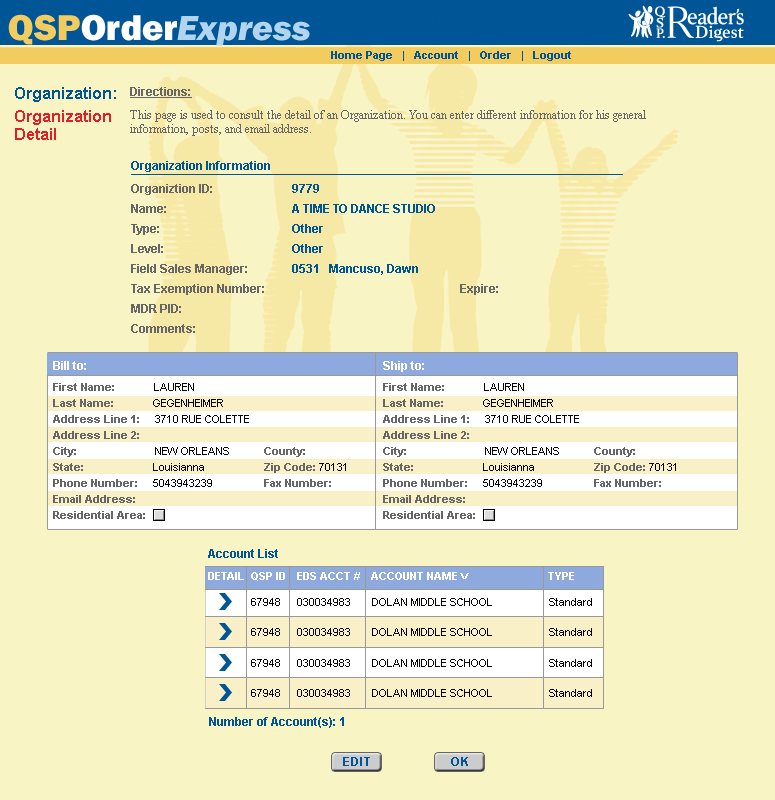
<style>
.page{position:relative;width:775px;height:800px;background:#f8f4c3}
.page>*{position:absolute;margin:0}
.t1{font:36px "FranklinGothic-HeavyItal";color:#b1d5f0}
.t2{font:36px "FranklinGothic-Heavy";color:#f3cc60}
.t3{font:36px "FranklinGothic-Heavy";color:#ffffff}
.t4{font:11px "Arial-BoldMT";color:#005596}
.t5{font:16px/18px "Arial-BoldMT";color:#005596}
.t6{font:16px/23px "Arial-BoldMT";color:#e31e28}
.t7{font:16px/18px "Arial-BoldMT";color:#e31e28}
.t8{font:12px/14px "TimesNewRomanPSMT";color:#666666}
.t9{font:12px/9px "Arial-BoldMT";color:#666666;text-decoration:underline}
.t10{font:12px "Arial-BoldMT";color:#005596}
.t11{font:12px/20px "Arial-BoldMT";color:#666666}
.t12{font:12px/20px "Arial-BoldMT";color:#005596}
.t13{font:12px "Arial-BoldMT";color:#666666}
.t14{font:12px "Arial-BoldMT";color:#ffffff}
.t15{font:11px/16px "Arial-BoldMT";color:#666666}
.t16{font:11px/16px "ArialMT";color:#000000}
.t17{font:11px "Arial-BoldMT";color:#ffffff}
.t18{font:8px "Arial-BoldMT";color:#ffffff;scale:1.5 1}
.t19{font:11px "ArialMT";color:#000000}
.t20{font:12px "Arial-BoldMT";letter-spacing:0.06em;color:#005596}
</style>
<div class="page">
<p class="t1" style="left:8px;top:14px;width:302px;height:32px"><span class="t2">QSP</span><span class="t3">Order</span>Express</p>
<p class="t4" style="left:331px;top:51px;width:240px;height:10px">Home Page   |   Account   |   Order   |   Logout</p>
<p class="t5" style="left:15px;top:87px;width:101px;height:53px">Organization:  <br><span class="t6">Organization <br></span><span class="t7">Detail</span></p>
<p class="t8" style="left:130px;top:87px;width:516px;height:49px"><span class="t9">Directions:<br><br></span>This page is used to consult the detail of an Organization. You can enter different information for his general <br>information, posts, and email address.</p>
<p class="t10" style="left:131px;top:161px;width:139px;height:11px">Organization Information</p>
<p class="t11" style="left:131px;top:184px;width:133px;height:149px">Organiztion ID:<br>Name:<br>Type:<br>Level:<br>Field Sales Manager:<br>Tax Exemption Number:<br>MDR PID:<br>Comments:</p>
<p class="t12" style="left:292px;top:184px;width:143px;height:91px">9779<br>A TIME TO DANCE STUDIO<br>Other<br>Other<br>0531   Mancuso, Dawn</p>
<p class="t13" style="left:460px;top:284px;width:38px;height:11px">Expire:</p>
<p class="t14" style="left:53px;top:361px;width:33px;height:9px">Bill to:</p>
<p class="t14" style="left:383px;top:361px;width:41px;height:11px">Ship to:</p>
<p class="t15" style="left:53px;top:383px;width:196px;height:136px">First Name:             <span class="t16">LAUREN<br></span>Last Name:             <span class="t16">GEGENHEIMER<br></span>Address Line 1:     <span class="t16">3710 RUE COLETTE<br></span>Address Line 2:<br>City:                          <span class="t16">NEW ORLEANS<br></span>State:                       <span class="t16">Louisianna<br></span>Phone Number:     <span class="t16">5043943239<br></span>Email Address:<br>Residential Area:</p>
<p class="t15" style="left:383px;top:383px;width:196px;height:136px">First Name:             <span class="t16">LAUREN<br></span>Last Name:             <span class="t16">GEGENHEIMER<br></span>Address Line 1:     <span class="t16">3710 RUE COLETTE<br></span>Address Line 2:<br>City:                          <span class="t16">NEW ORLEANS<br></span>State:                       <span class="t16">Louisianna<br></span>Phone Number:     <span class="t16">5043943239<br></span>Email Address:<br>Residential Area:</p>
<p class="t15" style="left:264px;top:447px;width:82px;height:40px">County:<br>Zip Code: <span class="t16">70131<br></span>Fax Number:</p>
<p class="t15" style="left:594px;top:447px;width:82px;height:40px">County:<br>Zip Code: <span class="t16">70131<br></span>Fax Number:</p>
<p class="t10" style="left:208px;top:549px;width:70px;height:9px">Account List</p>
<p class="t17" style="left:208px;top:572px;width:36px;height:8px">DETAIL</p>
<p class="t17" style="left:251px;top:572px;width:34px;height:9px">QSP ID</p>
<p class="t17" style="left:297px;top:572px;width:63px;height:8px">EDS ACCT #</p>
<p class="t17" style="left:371px;top:572px;width:98px;height:8px">ACCOUNT NAME <span class="t18">V</span></p>
<p class="t17" style="left:548px;top:572px;width:26px;height:8px">TYPE</p>
<p class="t19" style="left:251px;top:598px;width:29px;height:8px">67948</p>
<p class="t19" style="left:297px;top:598px;width:53px;height:8px">030034983</p>
<p class="t19" style="left:372px;top:598px;width:120px;height:8px">DOLAN MIDDLE SCHOOL</p>
<p class="t19" style="left:549px;top:598px;width:43px;height:8px">Standard</p>
<p class="t19" style="left:251px;top:628px;width:29px;height:8px">67948</p>
<p class="t19" style="left:297px;top:628px;width:53px;height:8px">030034983</p>
<p class="t19" style="left:372px;top:628px;width:120px;height:8px">DOLAN MIDDLE SCHOOL</p>
<p class="t19" style="left:549px;top:628px;width:43px;height:8px">Standard</p>
<p class="t19" style="left:251px;top:659px;width:29px;height:8px">67948</p>
<p class="t19" style="left:297px;top:659px;width:53px;height:8px">030034983</p>
<p class="t19" style="left:372px;top:659px;width:120px;height:8px">DOLAN MIDDLE SCHOOL</p>
<p class="t19" style="left:549px;top:659px;width:43px;height:8px">Standard</p>
<p class="t19" style="left:251px;top:689px;width:29px;height:8px">67948</p>
<p class="t19" style="left:297px;top:689px;width:53px;height:8px">030034983</p>
<p class="t19" style="left:372px;top:689px;width:120px;height:8px">DOLAN MIDDLE SCHOOL</p>
<p class="t19" style="left:549px;top:689px;width:43px;height:8px">Standard</p>
<p class="t10" style="left:209px;top:717px;width:135px;height:11px">Number of Account(s): 1</p>
<p class="t20" style="left:343px;top:757px;width:27px;height:9px">EDIT</p>
<p class="t20" style="left:451px;top:757px;width:17px;height:9px">OK</p>
</div>
